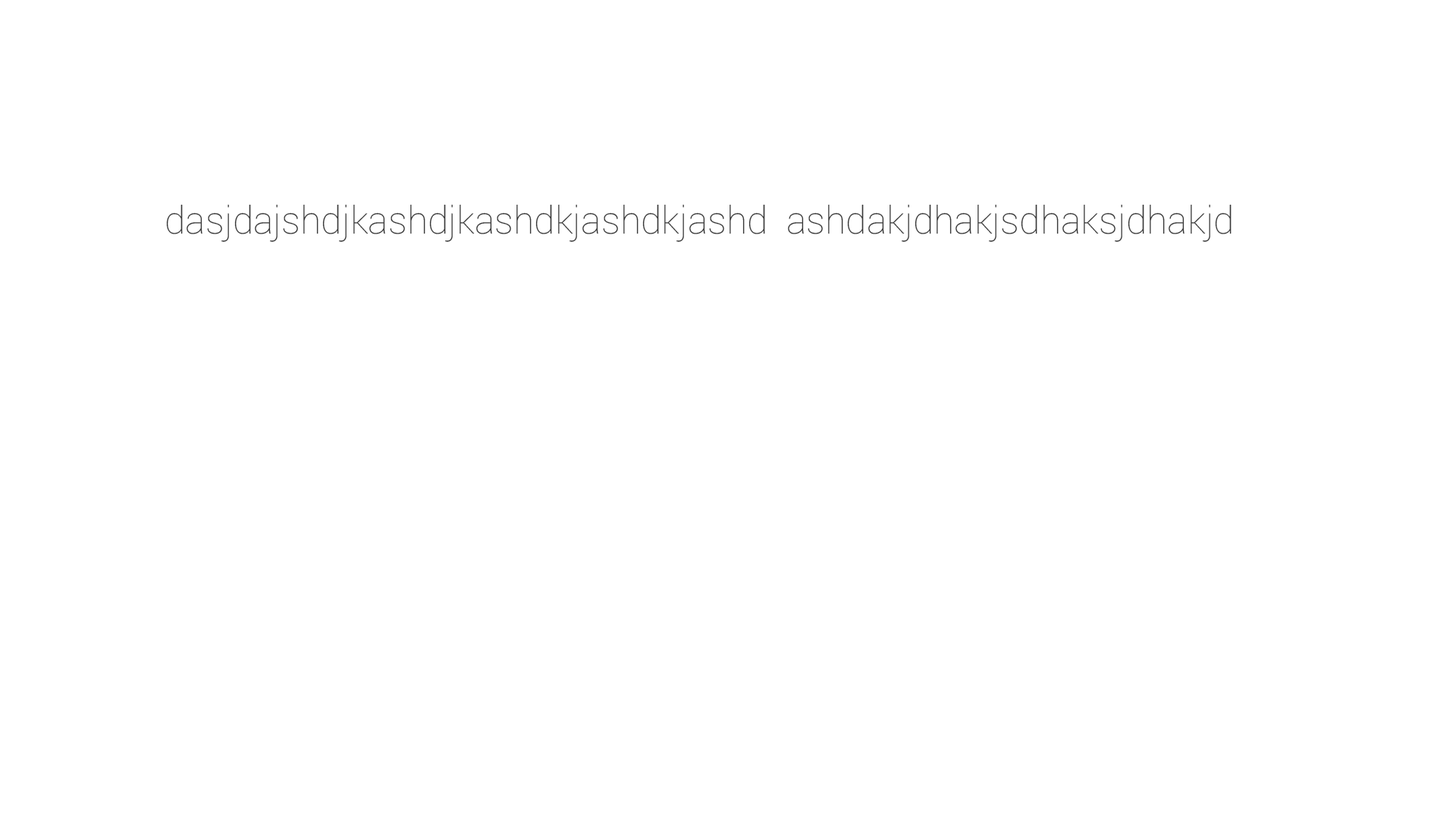
<style>
.page{position:relative;width:1456px;height:819px;background:#ffffff}
.page>*{position:absolute;margin:0}
.t1{font:9.1px "Roboto-Thin";color:#383838}
</style>
<div class="page">
<p class="t1" style="left:166px;top:204px;width:1066px;height:38px">dasjdajshdjkashdjkashdkjashdkjashd  ashdakjdhakjsdhaksjdhakjd</p>
</div>
